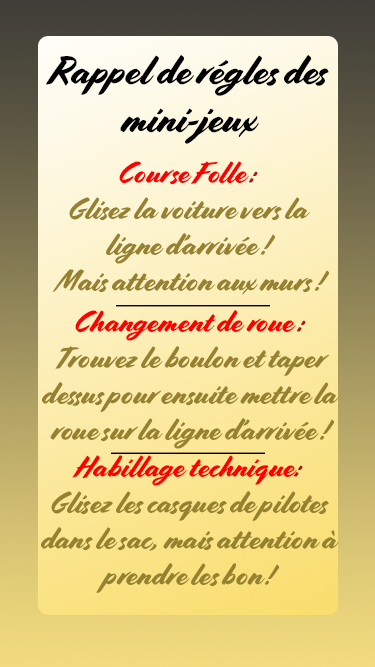
<style>
.page{position:relative;width:375px;height:667px}
.page>*{position:absolute;margin:0}
.t1{font:39.8px "Cortado";color:#000000}
.t2{font:30px "Cortado";color:#95812f}
.t3{font:30px "Cortado";color:#ff0000}
.t4{font:30px "Cortado";color:#a91b1b}
</style>
<div class="page">
<p class="t1" style="left:46px;top:55px;width:283px;height:89px;text-align:center">Rappel de régles des mini-jeux</p>
<p class="t2" style="left:52px;top:161px;width:277px;height:134px;text-align:center"><span class="t3">Course Folle </span><span class="t4">:<br></span>Glisez la voiture vers la ligne d’arrivée !<br> Mais attention aux murs !</p>
<p class="t2" style="left:42px;top:310px;width:297px;height:139px;text-align:center"><span class="t3">Changement de roue</span><span class="t4"> :<br></span>Trouvez le boulon et taper dessus pour ensuite mettre la roue sur la ligne d’arrivée !</p>
<p class="t2" style="left:41px;top:455px;width:298px;height:138px;text-align:center"><span class="t3">Habillage technique</span><span class="t4">:<br></span>Glisez les casques de pilotes dans le sac, mais attention à prendre les bon !</p>
</div>
